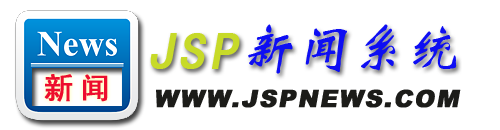
<style>
.page{position:relative;width:500px;height:130px;background:#ffffff}
.page>*{position:absolute;margin:0}
.t1{font:55px "STXinwei";color:#0e0ef3;text-transform:uppercase;font-style:italic}
.t2{font:52px "SimHei";letter-spacing:0.075em;color:#c7da29;text-transform:uppercase;font-weight:bold;font-style:italic}
.t3{font:30px "SimHei";letter-spacing:0.2em;color:#ed0d2d;text-transform:uppercase;font-weight:bold}
.t4{font:24px "Arial-Black";letter-spacing:0.05em;color:#1c1c19;text-transform:uppercase;font-weight:bold;font-style:italic}
</style>
<div class="page">
<p class="t1" style="left:150px;top:24px;width:307px;height:50px"><span class="t2">JSP</span>新闻系统</p>
<p class="t3" style="left:44px;top:74px;width:64px;height:28px">新闻</p>
<p class="t4" style="left:156px;top:89px;width:305px;height:19px">www.jspnews.com</p>
</div>
